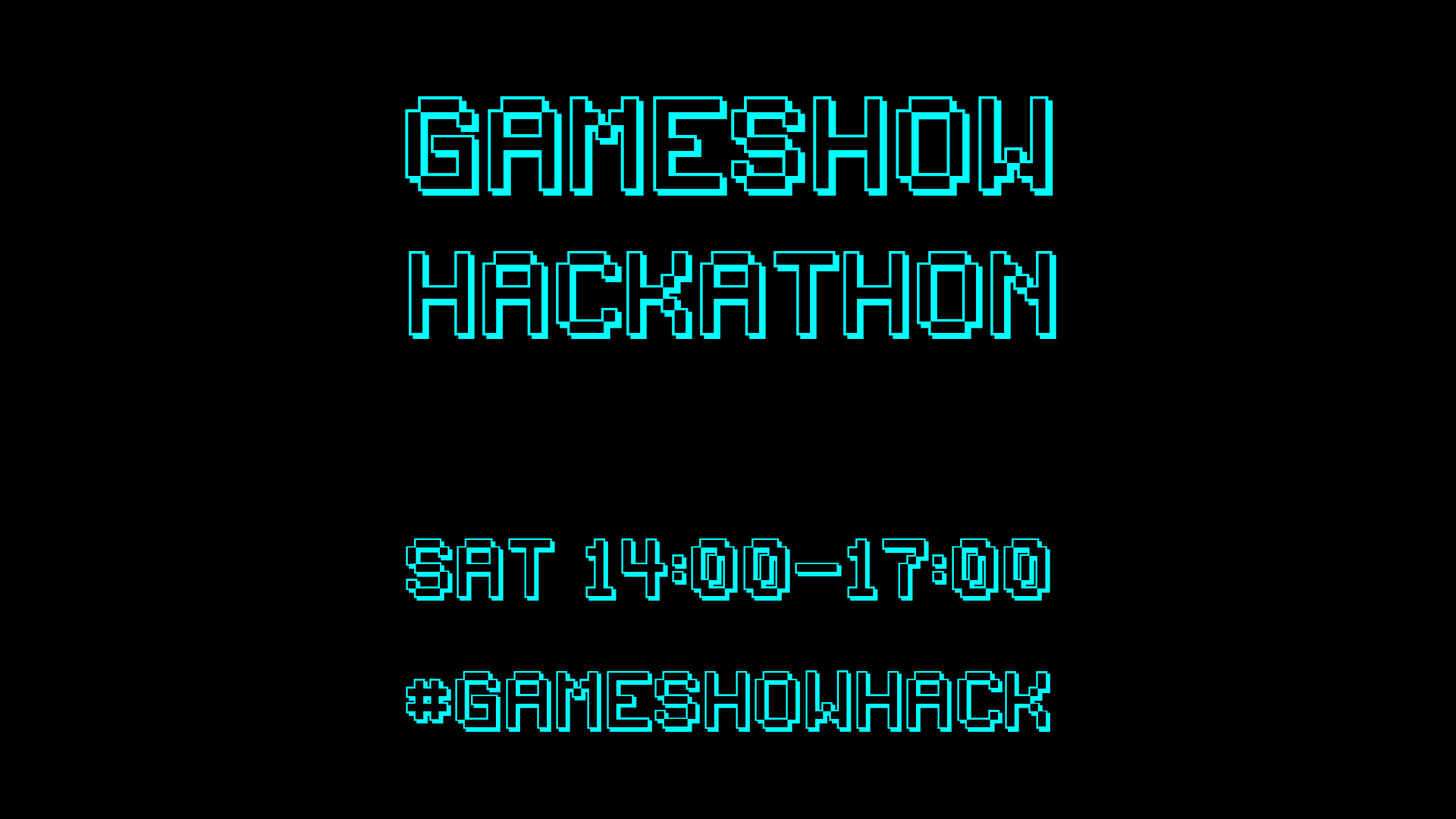
<style>
.page{position:relative;width:1456px;height:819px;background:#000000}
.page>*{position:absolute;margin:0}
.t1{font:89.5px "Backto1982";color:#00ffff}
.t2{font:79.6px "Backto1982";color:#00ffff}
.t3{font:56.1px "Backto1982";color:#00ffff}
.t4{font:54.6px "Backto1982";color:#00ffff}
</style>
<div class="page">
<p class="t1" style="left:405px;top:96px;width:648px;height:100px">Gameshow</p>
<p class="t2" style="left:409px;top:251px;width:647px;height:88px">Hackathon</p>
<p class="t3" style="left:406px;top:538px;width:644px;height:194px">sat 14:00-17:00<br><span class="t4"><br>#gameshowhack</span></p>
</div>
